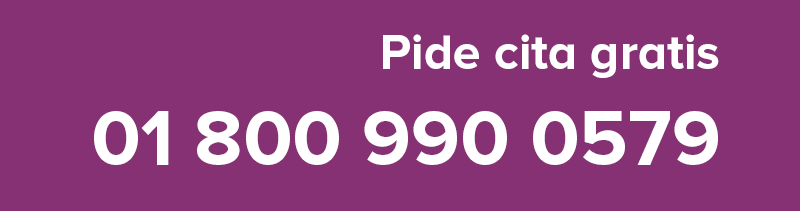
<style>
.page{position:relative;width:800px;height:211px;background:#863173}
.page>*{position:absolute;margin:0}
.t1{font:50px "ProximaNovaA-Bold";color:#ffffff}
.t2{font:80px "ProximaNovaA-Bold";color:#ffffff}
</style>
<div class="page">
<p class="t1" style="left:383px;top:34px;width:336px;height:44px">Pide cita gratis</p>
<p class="t2" style="left:94px;top:111px;width:624px;height:54px">01 800 990 0579</p>
</div>
